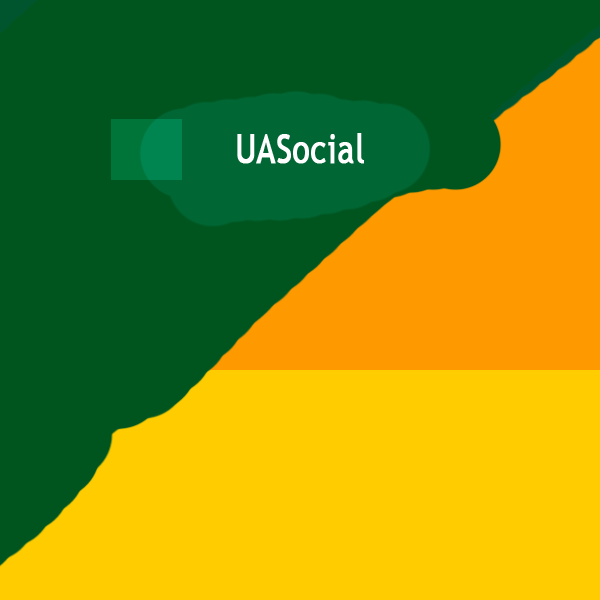
<style>
.page{position:relative;width:600px;height:600px;background:#00551f}
.page>*{position:absolute;margin:0}
.t1{font:40px "TrebuchetMS";color:#ffffff;font-weight:bold;scale:0.8 1}
</style>
<div class="page">
<p class="t1" style="left:237px;top:133px;width:127px;height:31px">UASocial</p>
</div>
